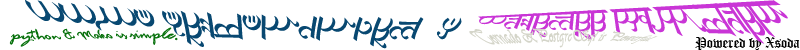
<style>
.page{position:relative;width:800px;height:50px;background:#ffffff}
.page>*{position:absolute;margin:0}
.t1{font:36px "SaratiEldamarRTL";color:#084871}
.t2{font:30px "SaratiEldamarRTLBar";color:#c935d6}
.t3{font:18px "RageItalic";color:#08710d}
.t4{font:14px "Vivaldii";color:#d4d5c9}
.t5{font:14px "OldEnglishTextMT";color:#000000}
</style>
<div class="page">
<p class="t1" style="left:25px;top:0px;width:437px;height:49px">PPTM NewsManager  @</p>
<p class="t2" style="left:478px;top:0px;width:310px;height:44px">Powered by Xsoda</p>
<p class="t3" style="left:9px;top:27px;width:169px;height:20px">python &amp; Mako is simple.</p>
<p class="t4" style="left:469px;top:27px;width:189px;height:21px">Tornado &amp;PostgreSql is Powerful.</p>
<p class="t5" style="left:695px;top:37px;width:105px;height:13px">Powered by Xsoda</p>
</div>
